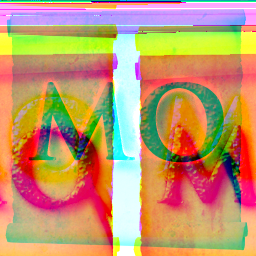
<style>
.page{position:relative;width:256px;height:256px}
.page>*{position:absolute;margin:0}
.t1{font:100px "TrajanPro-Bold";font-variant:small-caps;font-weight:bold}
</style>
<div class="page">
<p class="t1" style="left:28px;top:80px;width:196px;height:81px">MO</p>
</div>
